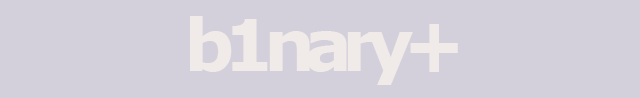
<style>
.page{position:relative;width:640px;height:98px;background:#d4d0db}
.page>*{position:absolute;margin:0}
.t1{font:72px "Verdana-Bold";letter-spacing:-0.15em;color:#f0ebe8}
</style>
<div class="page">
<p class="t1" style="left:190px;top:16px;width:268px;height:69px">b1nary+</p>
</div>
